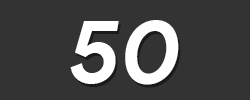
<style>
.page{position:relative;width:250px;height:100px;background:#333333}
.page>*{position:absolute;margin:0}
.t1{font:90px "ProductSans-BoldItalic";color:#ffffff}
</style>
<div class="page">
<p class="t1" style="left:70px;top:20px;width:109px;height:65px">50</p>
</div>
